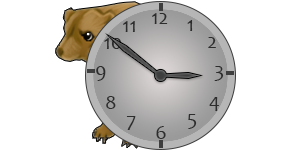
<style>
.page{position:relative;width:300px;height:150px;background:#ffffff}
.page>*{position:absolute;margin:0}
.t1{font:20.8px "Candara";color:#2d2d2d}
</style>
<div class="page">
<p class="t1" style="left:152px;top:13px;width:16px;height:11px">12</p>
<p class="t1" style="left:123px;top:21px;width:12px;height:11px">11</p>
<p class="t1" style="left:187px;top:20px;width:6px;height:11px">1</p>
<p class="t1" style="left:104px;top:38px;width:18px;height:11px">10</p>
<p class="t1" style="left:208px;top:37px;width:8px;height:11px">2</p>
<p class="t1" style="left:96px;top:66px;width:10px;height:15px">9</p>
<p class="t1" style="left:214px;top:66px;width:10px;height:15px">3</p>
<p class="t1" style="left:106px;top:96px;width:10px;height:13px">8</p>
<p class="t1" style="left:209px;top:97px;width:10px;height:14px">4</p>
<p class="t1" style="left:126px;top:116px;width:10px;height:14px">7</p>
<p class="t1" style="left:156px;top:126px;width:10px;height:13px">6</p>
<p class="t1" style="left:188px;top:114px;width:9px;height:15px">5</p>
</div>
